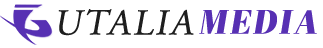
<style>
.page{position:relative;width:323px;height:48px;background:#ffffff}
.page>*{position:absolute;margin:0}
.t1{font:36.6px "AGaramondPro-Regular";letter-spacing:0.04em;color:#1e1e1e;font-weight:bold;font-style:italic}
.t2{font:33.9px "AbrilFatface-Italic";letter-spacing:0.055em;color:#5730b3;font-weight:bold}
</style>
<div class="page">
<p class="t1" style="left:58px;top:9px;width:136px;height:27px">UTALIA</p>
<p class="t2" style="left:199px;top:10px;width:118px;height:24px">MEDIA</p>
</div>
